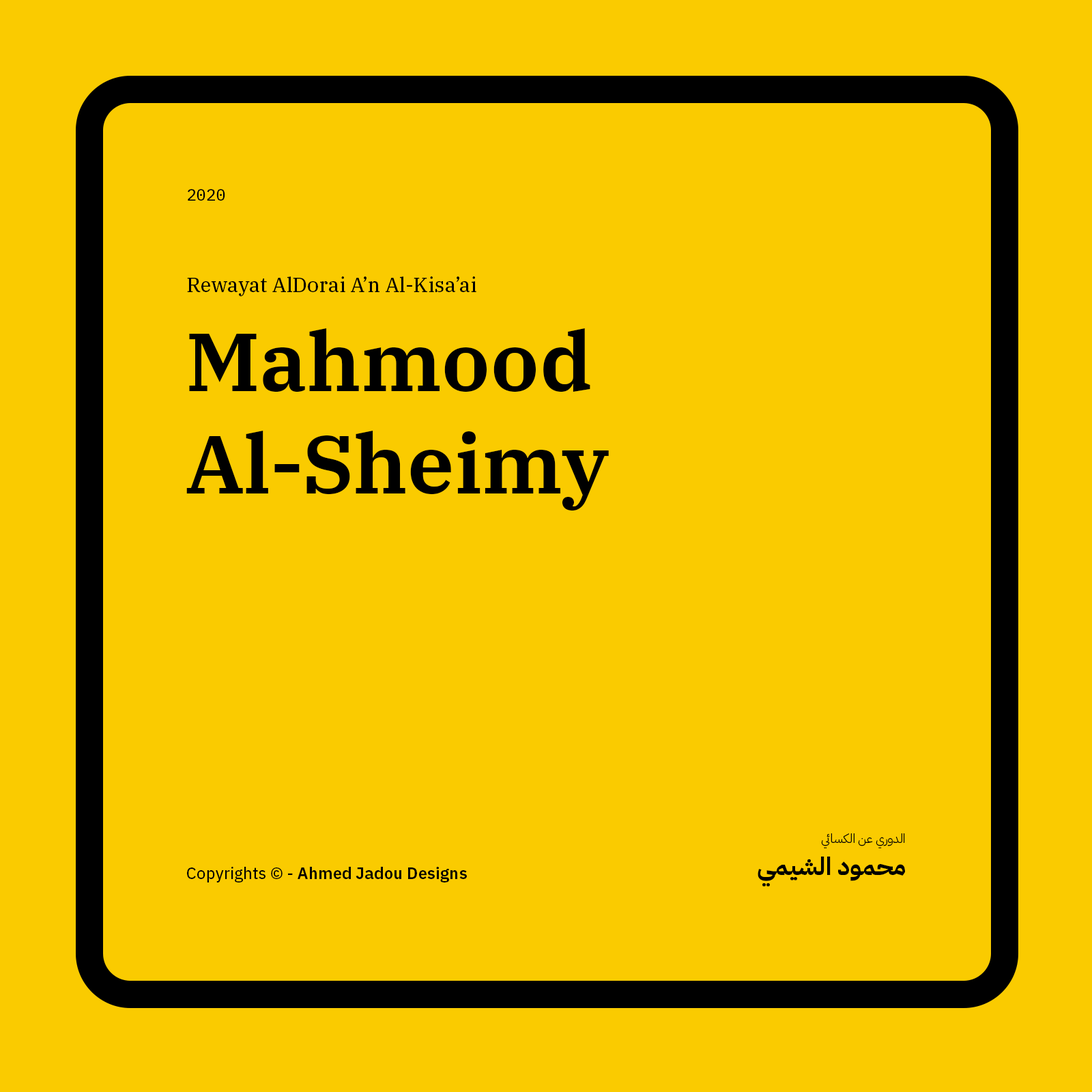
<style>
.page{position:relative;width:1092px;height:1092px;background:#facb00}
.page>*{position:absolute;margin:0}
.t1{font:16.4px "IBMPlexMono-Text";color:#000000}
.t2{font:20.5px "IBMPlexSerif-Text";color:#000000}
.t3{font:81.9px/102.7px "IBMPlexSerif-SemiBold";color:#000000}
.t4{font:12.3px "IBMPlexArabic-Light";color:#000000}
.t5{font:24.6px "IBMPlexArabic-Bold";color:#000000}
.t6{font:16.4px "IBMPlexSans-SemiBold";color:#000000}
.t7{font:16.4px "IBMPlexSans-Text";color:#000000}
</style>
<div class="page">
<p class="t1" style="left:188px;top:189px;width:37px;height:12px">2020</p>
<p class="t2" style="left:187px;top:276px;width:289px;height:20px">Rewayat AlDorai A’n Al-Kisa’ai</p>
<p class="t3" style="left:186px;top:328px;width:423px;height:183px">Mahmood Al-Sheimy</p>
<p class="t4" style="left:821px;top:833px;width:84px;height:15px">الدوري عن الكسائي</p>
<p class="t5" style="left:758px;top:857px;width:147px;height:30px">محمود الشيمي</p>
<p class="t6" style="left:187px;top:867px;width:280px;height:15px"><span class="t7">Copyrights © - </span>Ahmed Jadou Designs</p>
</div>
